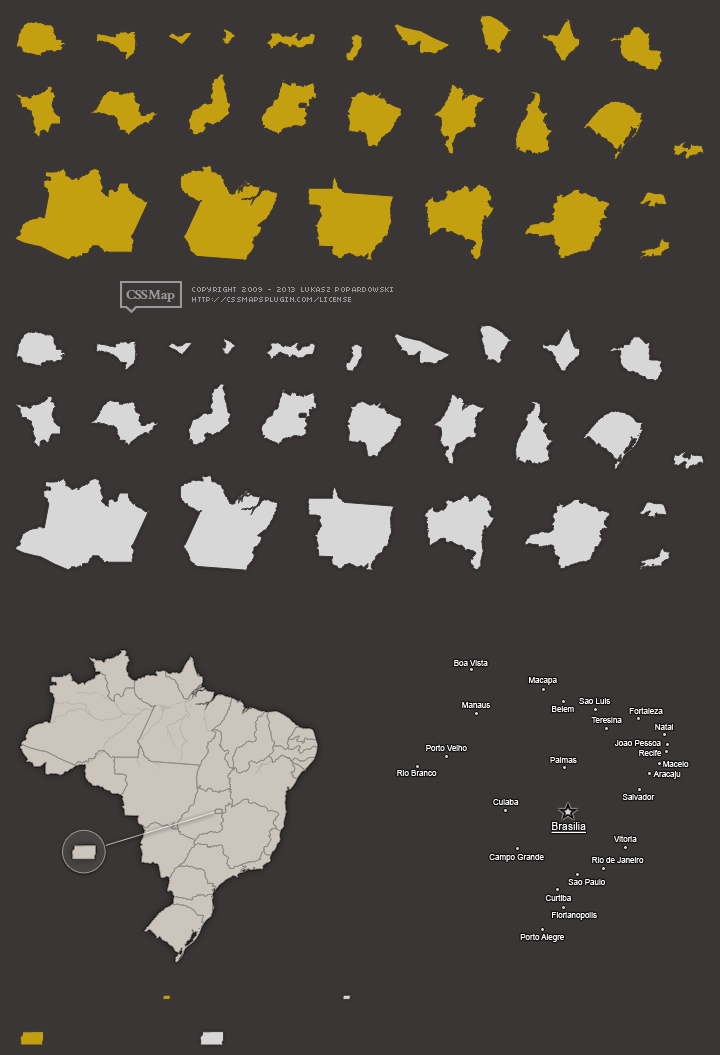
<style>
.page{position:relative;width:720px;height:1055px;background:#3a3635}
.page>*{position:absolute;margin:0}
.t1{font:8px "ArialMT";color:#ffffff}
.t2{font:11px "ArialMT";color:#ffffff;text-decoration:underline;scale:0.95 1}
</style>
<div class="page">
<p class="t1" style="left:454px;top:659px;width:34px;height:7px">Boa Vista</p>
<p class="t1" style="left:529px;top:677px;width:28px;height:8px">Macapa</p>
<p class="t1" style="left:462px;top:702px;width:29px;height:6px">Manaus</p>
<p class="t1" style="left:579px;top:698px;width:32px;height:6px">Sao Luis</p>
<p class="t1" style="left:552px;top:706px;width:22px;height:6px">Belem</p>
<p class="t1" style="left:629px;top:707px;width:34px;height:7px">Fortaleza</p>
<p class="t1" style="left:591px;top:717px;width:31px;height:6px">Teresina</p>
<p class="t1" style="left:655px;top:723px;width:18px;height:7px">Natal</p>
<p class="t1" style="left:426px;top:744px;width:41px;height:7px">Porto Velho</p>
<p class="t1" style="left:614px;top:740px;width:47px;height:6px">Joao Pessoa</p>
<p class="t1" style="left:639px;top:750px;width:23px;height:6px">Recife</p>
<p class="t1" style="left:550px;top:757px;width:27px;height:6px">Palmas</p>
<p class="t1" style="left:663px;top:761px;width:26px;height:6px">Maceio</p>
<p class="t1" style="left:397px;top:770px;width:40px;height:6px">Rio Branco</p>
<p class="t1" style="left:653px;top:771px;width:28px;height:8px">Aracaju</p>
<p class="t1" style="left:622px;top:794px;width:33px;height:6px">Salvador</p>
<p class="t1" style="left:493px;top:799px;width:26px;height:6px">Cuiaba</p>
<p class="t2" style="left:551px;top:822px;width:35px;height:11px">Brasilia</p>
<p class="t1" style="left:614px;top:835px;width:23px;height:7px">Vitoria</p>
<p class="t1" style="left:489px;top:854px;width:55px;height:8px">Campo Grande</p>
<p class="t1" style="left:592px;top:857px;width:52px;height:6px">Rio de Janeiro</p>
<p class="t1" style="left:568px;top:879px;width:37px;height:6px">Sao Paulo</p>
<p class="t1" style="left:545px;top:894px;width:26px;height:7px">Curtiba</p>
<p class="t1" style="left:552px;top:912px;width:45px;height:8px">Florianopolis</p>
<p class="t1" style="left:520px;top:933px;width:44px;height:9px">Porto Alegre</p>
</div>
